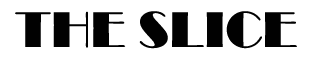
<style>
.page{position:relative;width:310px;height:60px;background:#ffffff}
.page>*{position:absolute;margin:0}
.t1{font:52px "Broadway";color:#010101}
</style>
<div class="page">
<p class="t1" style="left:15px;top:11px;width:282px;height:38px">THE SLICE</p>
</div>
